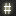
<style>
.page{position:relative;width:16px;height:16px}
.page>*{position:absolute;margin:0}
.t1{font:16px "SimSun";color:#ffffff}
</style>
<div class="page">
<p class="t1" style="left:4px;top:3px;width:7px;height:11px">#</p>
</div>
